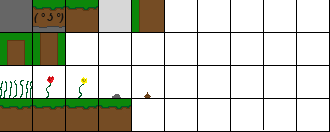
<style>
.page{position:relative;width:330px;height:132px;background:#ffffff}
.page>*{position:absolute;margin:0}
.t1{font:10.6px "Arial-BoldItalicMT";color:#111111}
</style>
<div class="page">
<p class="t1" style="left:34px;top:13px;width:30px;height:10px">( ͡° ͜ʖ ͡°)</p>
</div>
